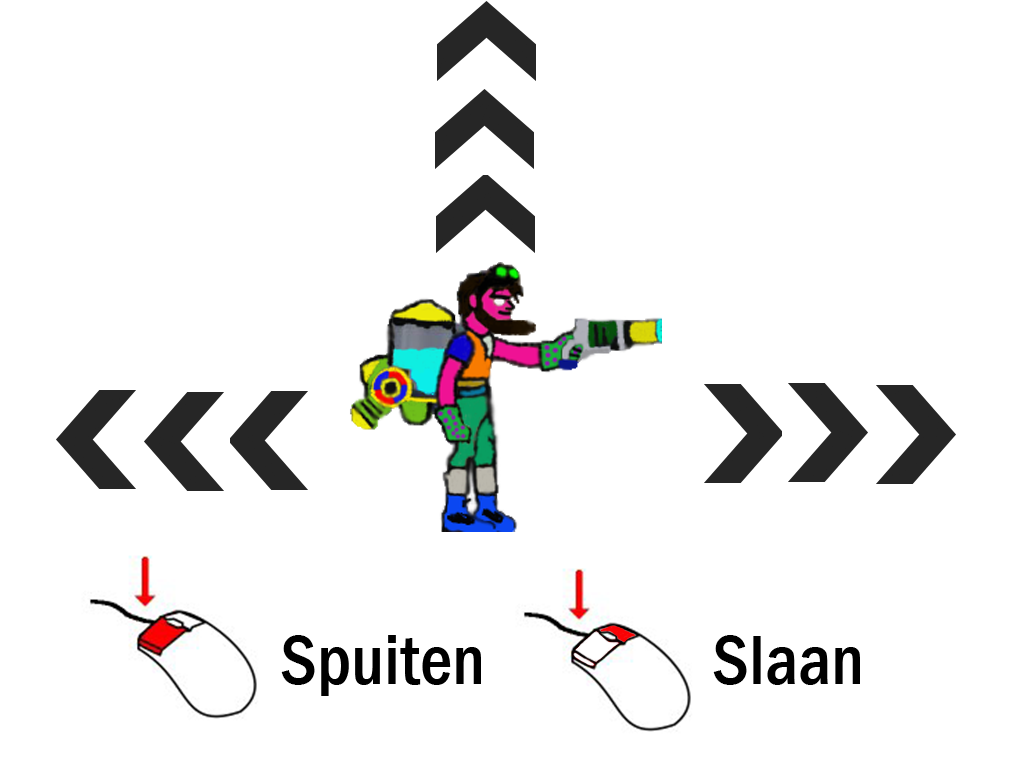
<style>
.page{position:relative;width:1024px;height:768px;background:#ffffff}
.page>*{position:absolute;margin:0}
.t1{font:72px "FranklinGothic-MediumCond";color:#000000}
</style>
<div class="page">
<p class="t1" style="left:281px;top:635px;width:200px;height:61px">Spuiten</p>
<p class="t1" style="left:713px;top:635px;width:147px;height:50px">Slaan</p>
</div>
